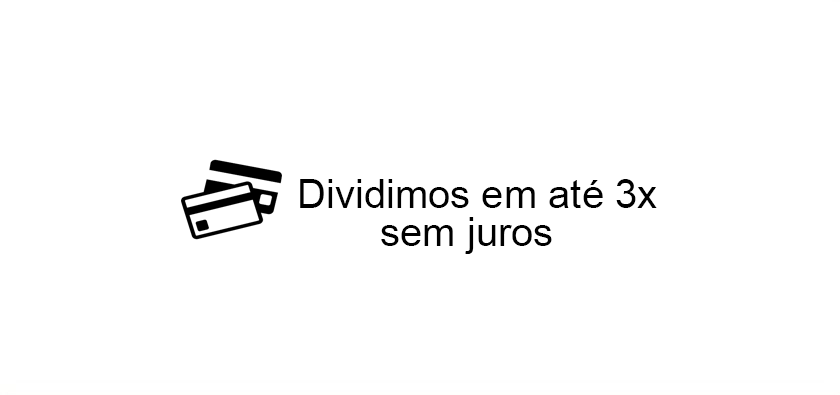
<style>
.page{position:relative;width:840px;height:395px;background:#ffffff}
.page>*{position:absolute;margin:0}
.t1{font:40px "ArialMT";color:#000000}
</style>
<div class="page">
<p class="t1" style="left:300px;top:179px;width:357px;height:29px">Dividimos em até 3x</p>
<p class="t1" style="left:381px;top:217px;width:171px;height:37px">sem juros</p>
</div>
